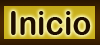
<style>
.page{position:relative;width:100px;height:45px}
.page>*{position:absolute;margin:0}
.t1{font:34px "ArialRoundedMTBold";color:#1e0e00;scale:0.92 1}
</style>
<div class="page">
<p class="t1" style="left:11px;top:11px;width:80px;height:24px">Inicio</p>
</div>
